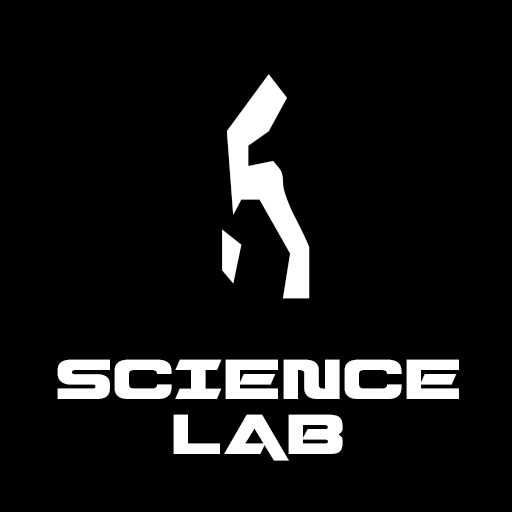
<style>
.page{position:relative;width:512px;height:512px;background:#000000}
.page>*{position:absolute;margin:0}
.t1{font:361.1px "DestronicGrafitti";color:#ffffff;font-variant:small-caps}
.t2{font:125.9px/55px "QuarkStorm";color:#ffffff;font-variant:small-caps}
</style>
<div class="page">
<p class="t1" style="left:222px;top:74px;width:88px;height:225px">g</p>
<p class="t2" style="left:57px;top:359px;width:402px;height:102px;text-align:center">science<br>lab</p>
</div>
